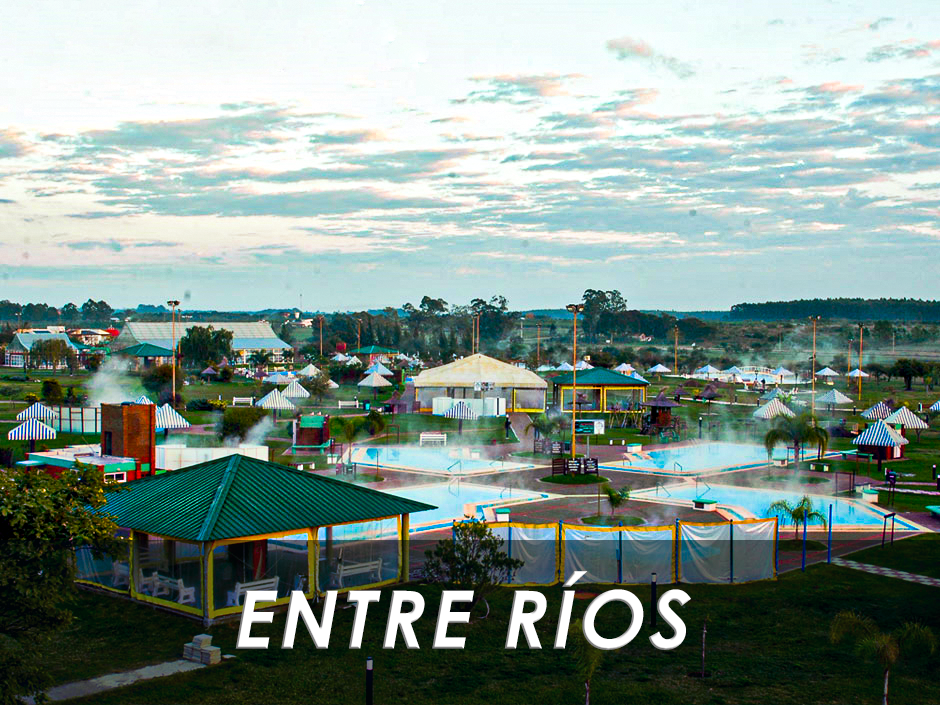
<style>
.page{position:relative;width:940px;height:705px}
.page>*{position:absolute;margin:0}
.t1{font:79.9px "CenturyGothic-Bold";letter-spacing:0.05em;color:#ffffff;font-style:italic}
</style>
<div class="page">
<p class="t1" style="left:235px;top:571px;width:456px;height:79px">ENTRE RÍOS</p>
</div>
